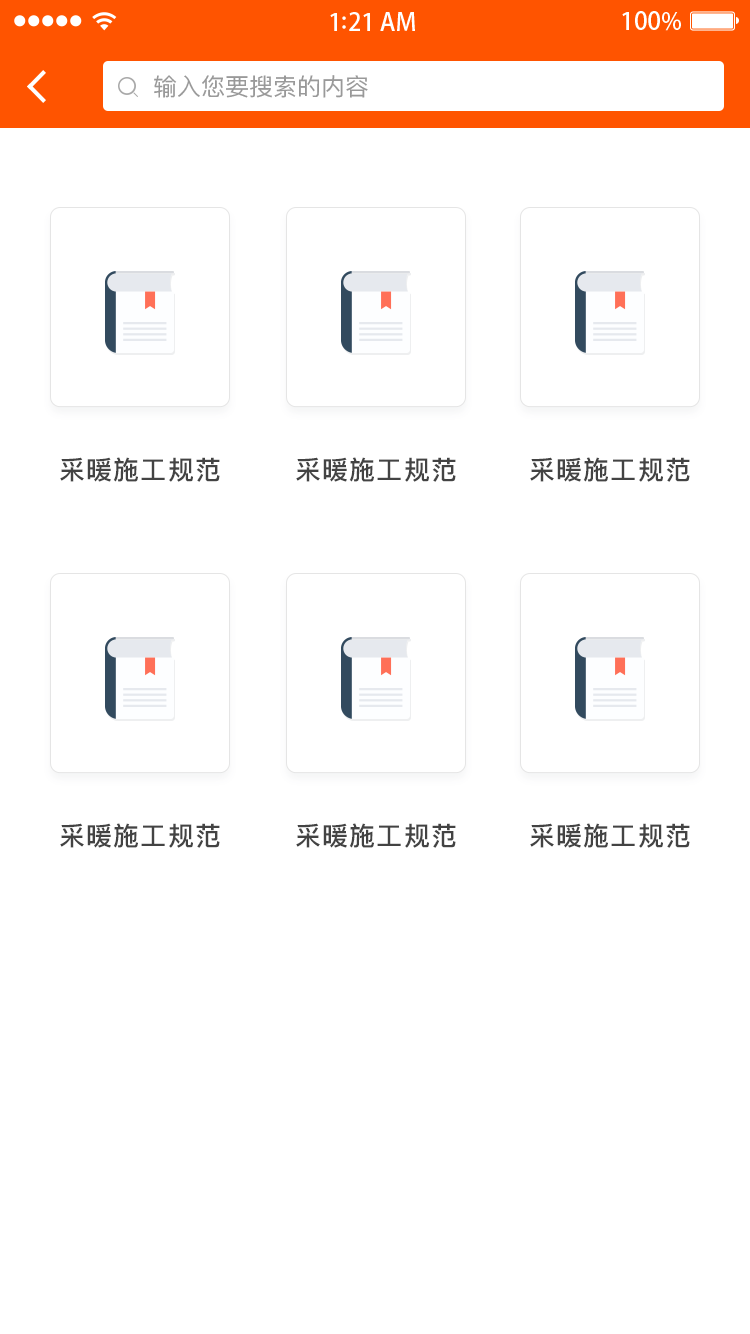
<style>
.page{position:relative;width:750px;height:1334px;background:#ffffff}
.page>*{position:absolute;margin:0}
.t1{font:24px "PingFangSC-Regular";color:#999999}
.t2{font:26px "PingFangSC-Medium";letter-spacing:0.04em;color:#434343}
</style>
<div class="page">
<p class="t1" style="left:154px;top:75px;width:214px;height:23px">输入您要搜索的内容</p>
<p class="t2" style="left:60px;top:457px;width:160px;height:25px">采暖施工规范</p>
<p class="t2" style="left:296px;top:457px;width:160px;height:25px">采暖施工规范</p>
<p class="t2" style="left:530px;top:457px;width:160px;height:25px">采暖施工规范</p>
<p class="t2" style="left:60px;top:823px;width:160px;height:25px">采暖施工规范</p>
<p class="t2" style="left:296px;top:823px;width:160px;height:25px">采暖施工规范</p>
<p class="t2" style="left:530px;top:823px;width:160px;height:25px">采暖施工规范</p>
</div>
